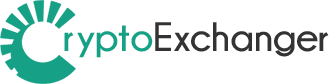
<style>
.page{position:relative;width:330px;height:84px;background:#ffffff}
.page>*{position:absolute;margin:0}
.t1{font:41px "Champagne&Limousines-Bold";color:#333333}
.t2{font:41px "Champagne&Limousines-Bold";color:#16a085}
</style>
<div class="page">
<p class="t1" style="left:64px;top:22px;width:265px;height:36px"><span class="t2">rypto</span>Exchanger</p>
</div>
